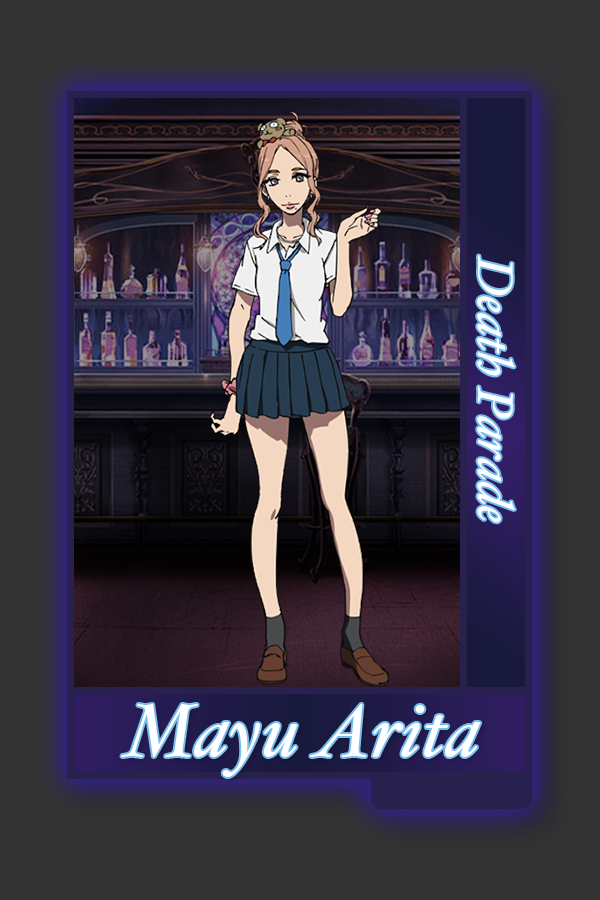
<style>
.page{position:relative;width:600px;height:900px;background:#333333}
.page>*{position:absolute;margin:0}
.t1{font:50px "HoeflerText-Italic";color:#ffffff}
.t2{font:75px "HoeflerText-Italic";color:#ffffff}
</style>
<div class="page">
<p class="t1" style="left:477px;top:255px;width:38px;height:268px;rotate:90deg">Death Parade</p>
<p class="t2" style="left:121px;top:704px;width:360px;height:73px">Mayu Arita</p>
</div>
